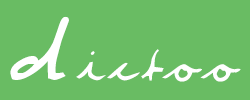
<style>
.page{position:relative;width:250px;height:100px;background:#69bc63}
.page>*{position:absolute;margin:0}
.t1{font:80px "RunawayRegularSWFTE";color:#ffffff}
.t2{font:150px "RunawayRegularSWFTE";color:#ffffff}
</style>
<div class="page">
<p class="t1" style="left:10px;top:16px;width:231px;height:66px"><span class="t2">d</span>ictoo</p>
</div>
